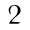
<style>
.page{position:relative;width:30px;height:30px;background:#ffffff}
.page>*{position:absolute;margin:0}
.t1{font:29px "Schwarzwald";color:#000000}
</style>
<div class="page">
<p class="t1" style="left:8px;top:5px;width:13px;height:19px">2</p>
</div>
